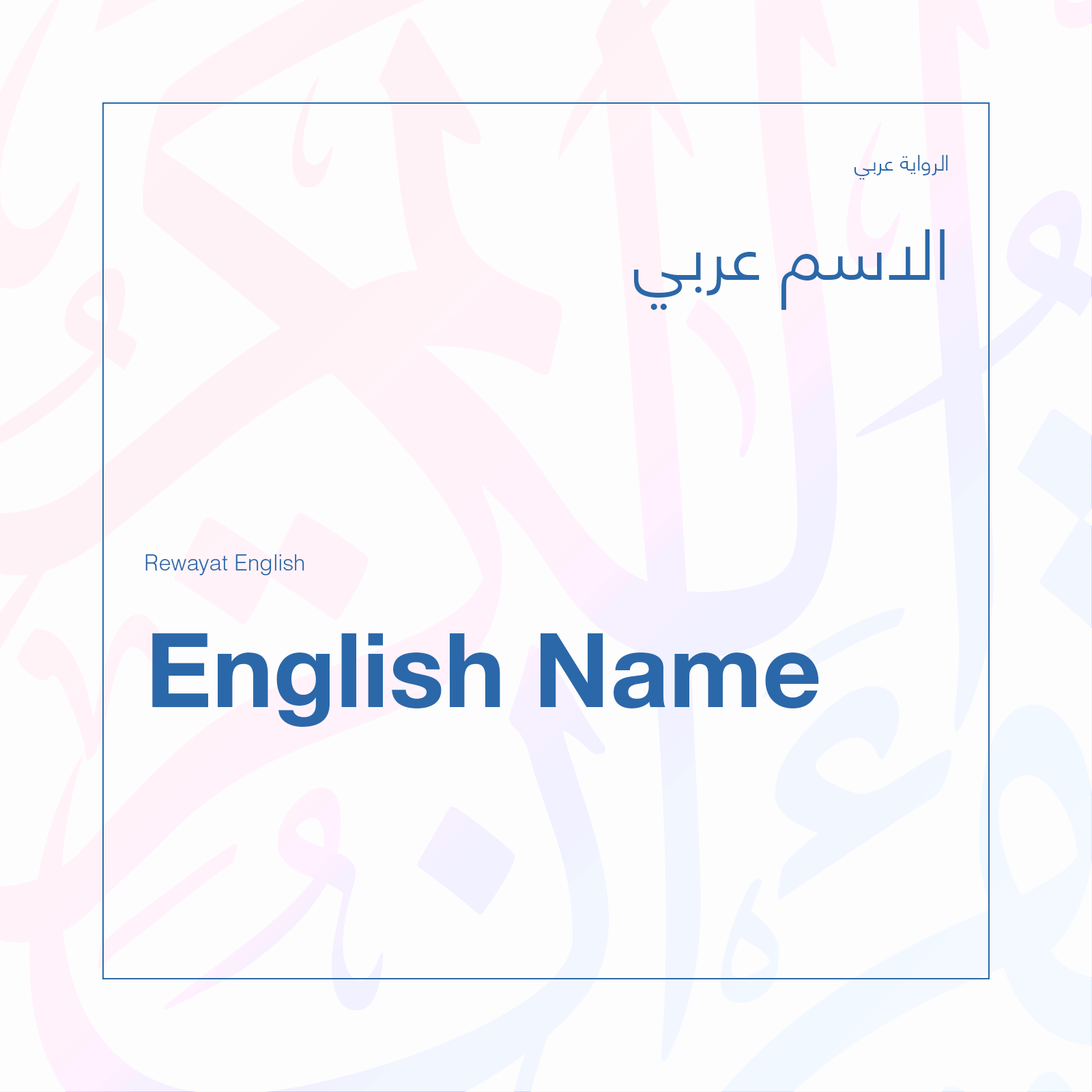
<style>
.page{position:relative;width:1092px;height:1092px;background:#fdfdfd}
.page>*{position:absolute;margin:0}
.t1{font:21.8px "HelveticaNeueLTArabic-Light";color:#2b68a9}
.t2{font:71px "HelveticaNeueLTArabic-Light";color:#2b68a9}
.t3{font:21.8px "HelveticaLTStd-Light";color:#2b68a9}
.t4{font:102.8px "HelveticaNeueLTStd-Bd";color:#2b68a9}
</style>
<div class="page">
<p class="t1" style="left:854px;top:155px;width:94px;height:24px">الرواية عربي</p>
<p class="t2" style="left:634px;top:229px;width:311px;height:81px">الاسم عربي</p>
<p class="t3" style="left:145px;top:554px;width:159px;height:21px">Rewayat English</p>
<p class="t4" style="left:152px;top:633px;width:667px;height:94px">English Name</p>
</div>
